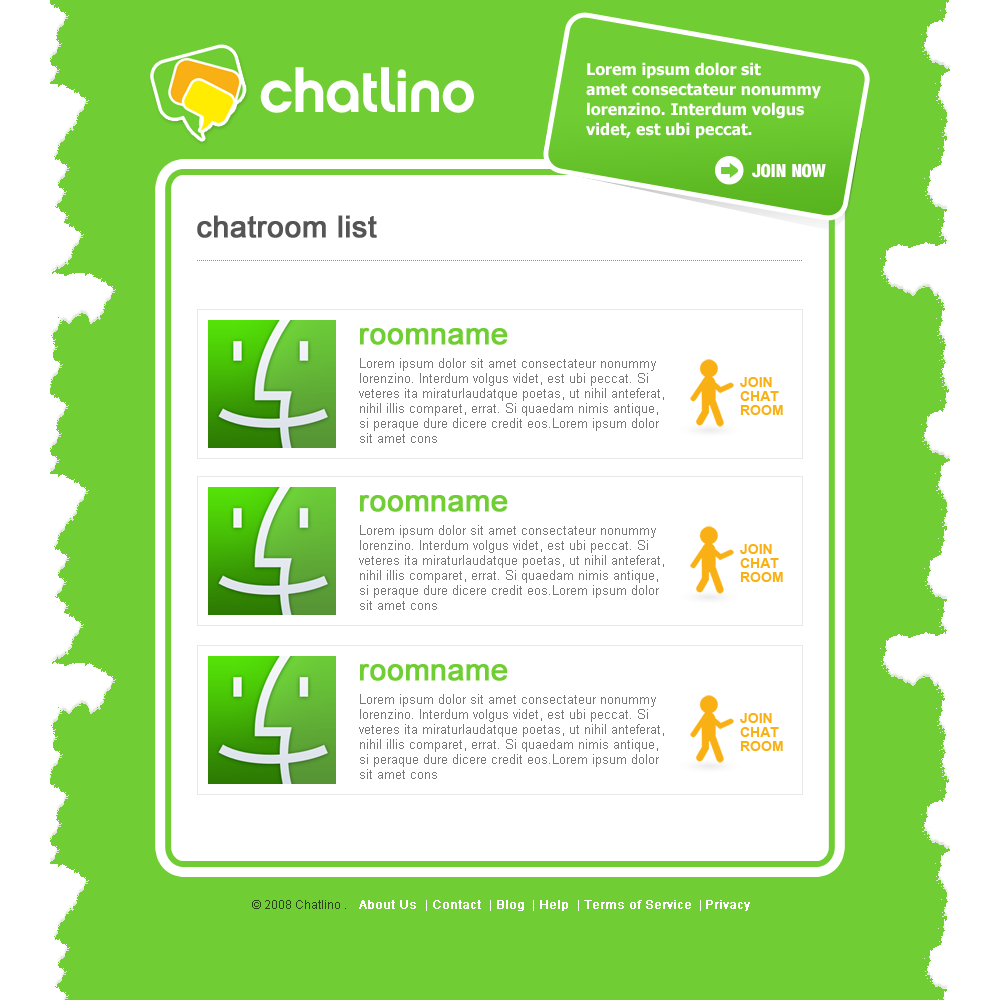
<style>
.page{position:relative;width:1000px;height:1000px;background:#ffffff}
.page>*{position:absolute;margin:0}
.t1{font:16px/20px "Tahoma-Bold";color:#ffffff}
.t2{font:60px "Chalet-NewYorkNineteenSeventy";letter-spacing:-0.025em;color:#ffffff}
.t3{font:18px "Harvest";color:#ffffff;text-transform:uppercase}
.t4{font:30px "ArialMT";color:#555555;font-weight:bold}
.t5{font:30px "ArialMT";color:#70ce34;font-weight:bold}
.t6{font:13px/15px "ArialMT";color:#777777}
.t7{font:14px/14px "Arial-BoldMT";color:#f8b015;text-transform:uppercase}
.t8{font:12px "ArialMT";color:#2b431b}
.t9{font:12px "ArialMT";color:#ffffff;font-weight:bold}
.t10{font:12px "ArialMT";color:#ffffff}
</style>
<div class="page">
<p class="t1" style="left:586px;top:62px;width:235px;height:77px">Lorem ipsum dolor sit <br>amet consectateur nonummy <br>lorenzino. Interdum volgus <br>videt, est ubi peccat.</p>
<p class="t2" style="left:260px;top:67px;width:214px;height:46px">chatlino</p>
<p class="t3" style="left:752px;top:163px;width:74px;height:15px">join now</p>
<p class="t4" style="left:197px;top:215px;width:180px;height:23px">chatroom list</p>
<p class="t5" style="left:360px;top:328px;width:148px;height:17px">roomname</p>
<p class="t6" style="left:359px;top:358px;width:305px;height:85px">Lorem ipsum dolor sit amet consectateur nonummy <br>lorenzino. Interdum volgus videt, est ubi peccat. Si <br>veteres ita miraturlaudatque poetas, ut nihil anteferat, <br>nihil illis comparet, errat. Si quaedam nimis antique, <br>si peraque dure dicere credit eos.Lorem ipsum dolor <br>sit amet cons</p>
<p class="t7" style="left:740px;top:377px;width:43px;height:38px">join<br>chat<br>room</p>
<p class="t5" style="left:360px;top:495px;width:148px;height:17px">roomname</p>
<p class="t6" style="left:359px;top:525px;width:305px;height:85px">Lorem ipsum dolor sit amet consectateur nonummy <br>lorenzino. Interdum volgus videt, est ubi peccat. Si <br>veteres ita miraturlaudatque poetas, ut nihil anteferat, <br>nihil illis comparet, errat. Si quaedam nimis antique, <br>si peraque dure dicere credit eos.Lorem ipsum dolor <br>sit amet cons</p>
<p class="t7" style="left:740px;top:544px;width:43px;height:38px">join<br>chat<br>room</p>
<p class="t5" style="left:360px;top:664px;width:148px;height:17px">roomname</p>
<p class="t6" style="left:359px;top:694px;width:305px;height:85px">Lorem ipsum dolor sit amet consectateur nonummy <br>lorenzino. Interdum volgus videt, est ubi peccat. Si <br>veteres ita miraturlaudatque poetas, ut nihil anteferat, <br>nihil illis comparet, errat. Si quaedam nimis antique, <br>si peraque dure dicere credit eos.Lorem ipsum dolor <br>sit amet cons</p>
<p class="t7" style="left:740px;top:713px;width:43px;height:38px">join<br>chat<br>room</p>
<p class="t8" style="left:252px;top:900px;width:498px;height:11px">© 2008 Chatlino .<span class="t9">   About Us  </span><span class="t10">|</span><span class="t9"> Contact  </span><span class="t10">|</span><span class="t9"> Blog </span><span class="t10"> |</span><span class="t9"> Help  </span><span class="t10">|</span><span class="t9"> Terms of Service </span><span class="t10"> | </span><span class="t9">Privacy</span></p>
</div>
